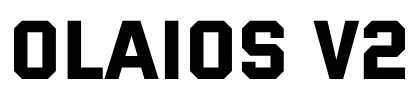
<style>
.page{position:relative;width:420px;height:100px;background:#ffffff}
.page>*{position:absolute;margin:0}
.t1{font:83.5px "Versa-Versa";color:#000000}
</style>
<div class="page">
<p class="t1" style="left:14px;top:20px;width:391px;height:59px">OLAIOS V2</p>
</div>
